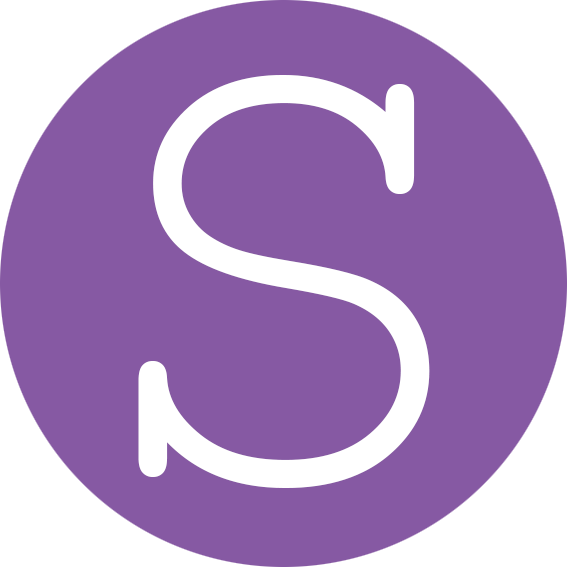
<style>
.page{position:relative;width:567px;height:567px;background:#8659a3}
.page>*{position:absolute;margin:0}
.t1{font:688.6px "CourierNewPSMT";color:#ffffff}
</style>
<div class="page">
<p class="t1" style="left:138px;top:74px;width:292px;height:414px">S</p>
</div>
